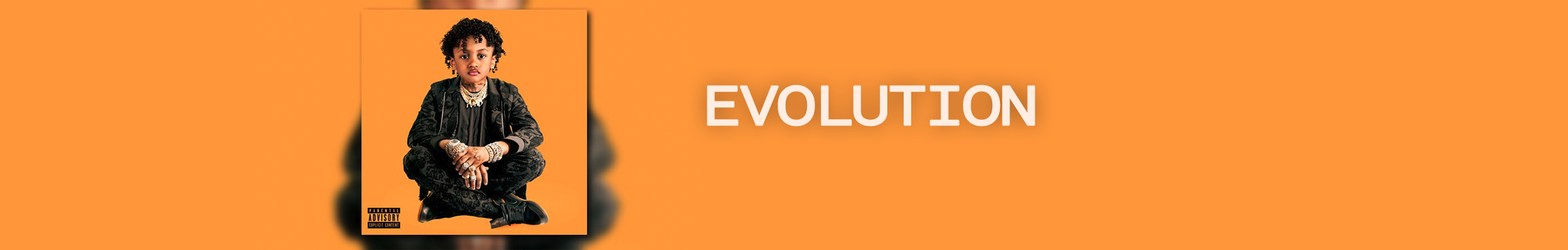
<style>
.page{position:relative;width:1568px;height:250px;background:#ff963a}
.page>*{position:absolute;margin:0}
.t1{font:55.1px "Apercu-Mono";letter-spacing:-0.075em;color:#ffede1;font-weight:bold;scale:1.18 1}
</style>
<div class="page">
<p class="t1" style="left:707px;top:85px;width:328px;height:42px">EVOLUTION</p>
</div>
